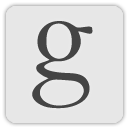
<style>
.page{position:relative;width:128px;height:128px;background:#e7e7e7}
.page>*{position:absolute;margin:0}
.t1{font:132px "Garamond";color:#444444}
</style>
<div class="page">
<p class="t1" style="left:32px;top:21px;width:61px;height:88px">g</p>
</div>
